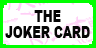
<style>
.page{position:relative;width:96px;height:48px;background:#ffffff}
.page>*{position:absolute;margin:0}
.t1{font:17px/15.9px "Arial-Black";color:#050505;scale:0.69 1}
</style>
<div class="page">
<p class="t1" style="left:5px;top:10px;width:85px;height:28px;text-align:center">THE  <br>JOKER CARD</p>
</div>
